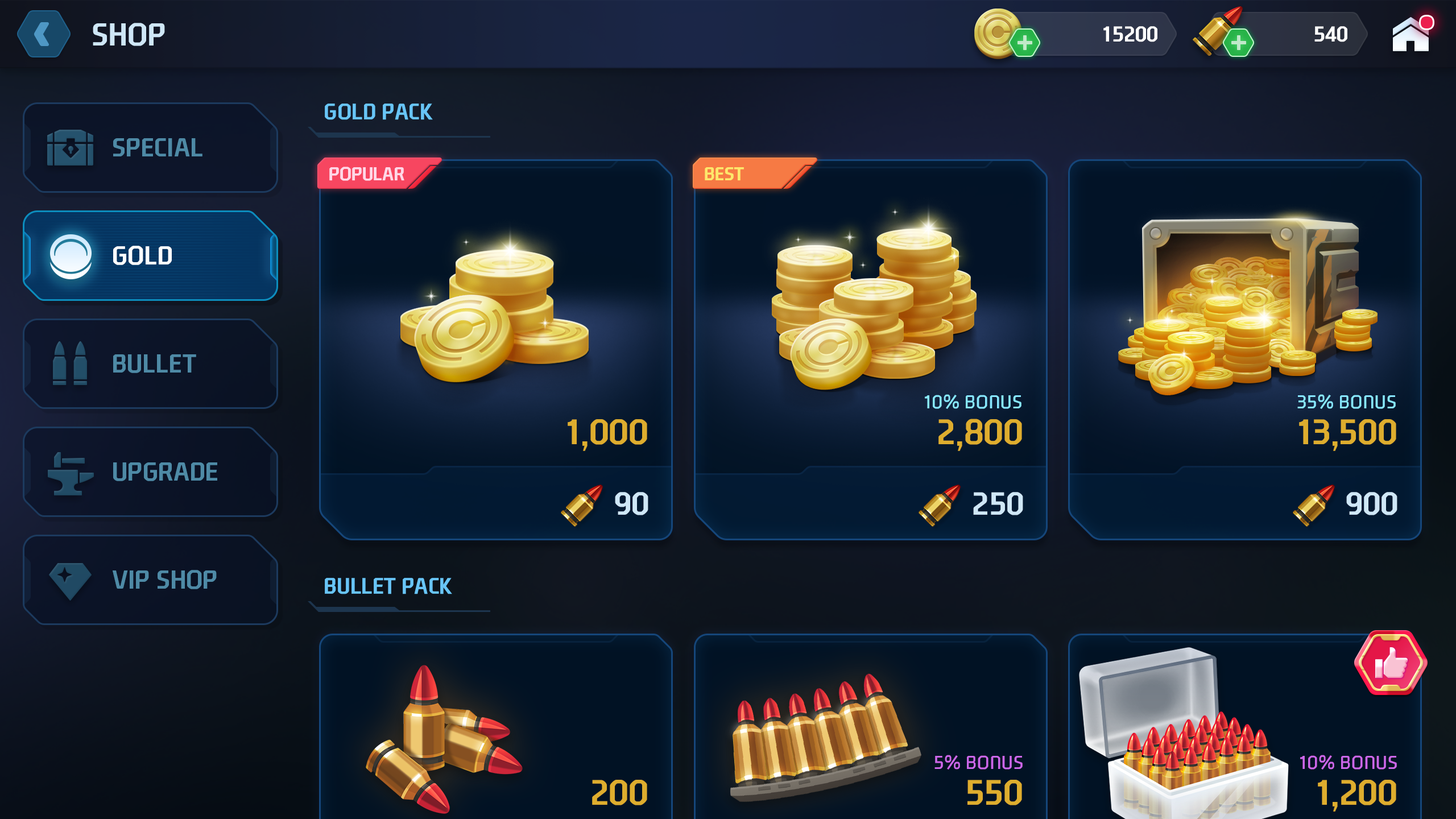
<style>
.page{position:relative;width:1456px;height:819px}
.page>*{position:absolute;margin:0}
.t1{font:30.6px "NEXONFootballGothicB";color:#cfe7f7;text-transform:uppercase}
.t2{font:20.7px "NEXONFootballGothicB";color:#ffffff;text-transform:uppercase}
.t3{font:21.6px "NEXONFootballGothicB";color:#68c5f7;text-transform:uppercase}
.t4{font:25px "NEXONFootballGothicB";color:#4e8aa6;text-transform:uppercase}
.t5{font:17.9px "NEXONFootballGothicB";color:#ffd7e7;text-transform:uppercase}
.t6{font:17.9px "NEXONFootballGothicB";color:#fde76b;text-transform:uppercase}
.t7{font:25px "NEXONFootballGothicB";color:#ffffff;text-transform:uppercase}
.t8{font:18.2px "NEXONFootballGothicL";color:#87e7ff;text-transform:uppercase}
.t9{font:34.1px "NEXONFootballGothicB";color:#dead2e}
.t10{font:30.7px "NEXONFootballGothicB";color:#cfe7f7}
.t11{font:18.2px "NEXONFootballGothicL";color:#cc67e9;text-transform:uppercase}
</style>
<div class="page">
<p class="t1" style="left:93px;top:23px;width:72px;height:23px">shop</p>
<p class="t2" style="left:1103px;top:26px;width:54px;height:16px">15200</p>
<p class="t2" style="left:1314px;top:26px;width:33px;height:16px">540</p>
<p class="t3" style="left:325px;top:104px;width:108px;height:16px">Gold Pack</p>
<p class="t4" style="left:113px;top:138px;width:89px;height:18px">Special</p>
<p class="t5" style="left:329px;top:167px;width:75px;height:14px">popular</p>
<p class="t6" style="left:705px;top:167px;width:39px;height:14px">Best</p>
<p class="t7" style="left:113px;top:246px;width:59px;height:19px">Gold</p>
<p class="t7" style="left:113px;top:246px;width:59px;height:19px">Gold</p>
<p class="t4" style="left:113px;top:354px;width:83px;height:19px">Bullet</p>
<p class="t8" style="left:925px;top:394px;width:96px;height:15px">10% Bonus</p>
<p class="t8" style="left:1297px;top:394px;width:99px;height:15px">35% Bonus</p>
<p class="t9" style="left:568px;top:419px;width:79px;height:32px">1,000</p>
<p class="t9" style="left:938px;top:419px;width:84px;height:32px">2,800</p>
<p class="t9" style="left:1299px;top:419px;width:97px;height:32px">13,500</p>
<p class="t4" style="left:113px;top:462px;width:104px;height:19px">Upgrade</p>
<p class="t10" style="left:615px;top:492px;width:33px;height:23px">90</p>
<p class="t10" style="left:973px;top:492px;width:50px;height:23px">250</p>
<p class="t10" style="left:1346px;top:492px;width:51px;height:23px">900</p>
<p class="t4" style="left:113px;top:570px;width:104px;height:19px">VIP Shop</p>
<p class="t3" style="left:325px;top:578px;width:127px;height:16px">Bullet Pack</p>
<p class="t11" style="left:934px;top:755px;width:89px;height:15px">5% Bonus</p>
<p class="t11" style="left:1300px;top:755px;width:97px;height:15px">10% Bonus</p>
<p class="t9" style="left:592px;top:780px;width:55px;height:25px">200</p>
<p class="t9" style="left:967px;top:780px;width:55px;height:25px">550</p>
<p class="t9" style="left:1318px;top:780px;width:78px;height:32px">1,200</p>
</div>
